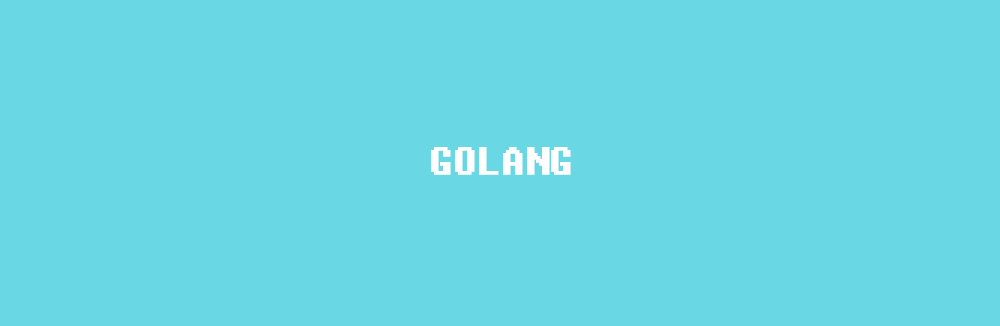
<style>
.page{position:relative;width:1000px;height:326px;background:#6ad7e5}
.page>*{position:absolute;margin:0}
.t1{font:48px "Fixedsys";color:#fffefe;text-transform:uppercase;font-weight:bold}
</style>
<div class="page">
<p class="t1" style="left:431px;top:147px;width:140px;height:28px">golang</p>
</div>
